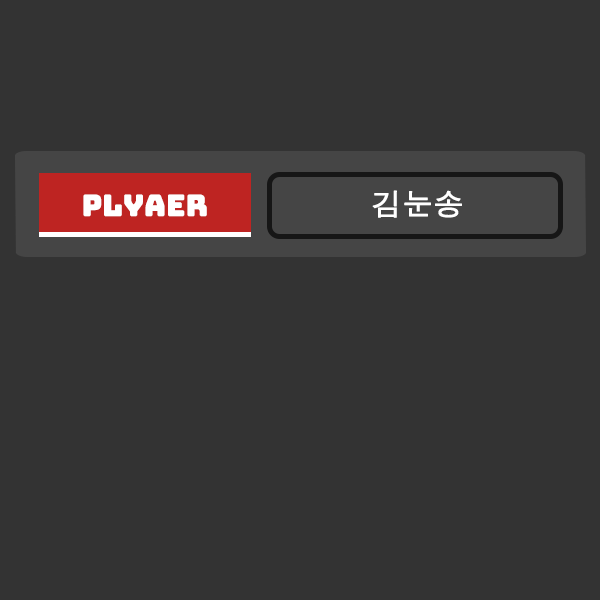
<style>
.page{position:relative;width:600px;height:600px;background:#333333}
.page>*{position:absolute;margin:0}
.t1{font:30px "Bungee-Regular";color:#ffffff}
.t2{font:30px "DotumChe";color:#ffffff;font-weight:bold}
</style>
<div class="page">
<p class="t1" style="left:83px;top:194px;width:124px;height:23px">Plyaer</p>
<p class="t2" style="left:372px;top:190px;width:90px;height:28px">김눈송</p>
</div>
